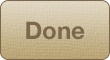
<style>
.page{position:relative;width:110px;height:60px}
.page>*{position:absolute;margin:0}
.t1{font:24px "HelveticaNeue-Bold";color:#7c684c}
</style>
<div class="page">
<p class="t1" style="left:26px;top:21px;width:59px;height:19px">Done</p>
</div>
